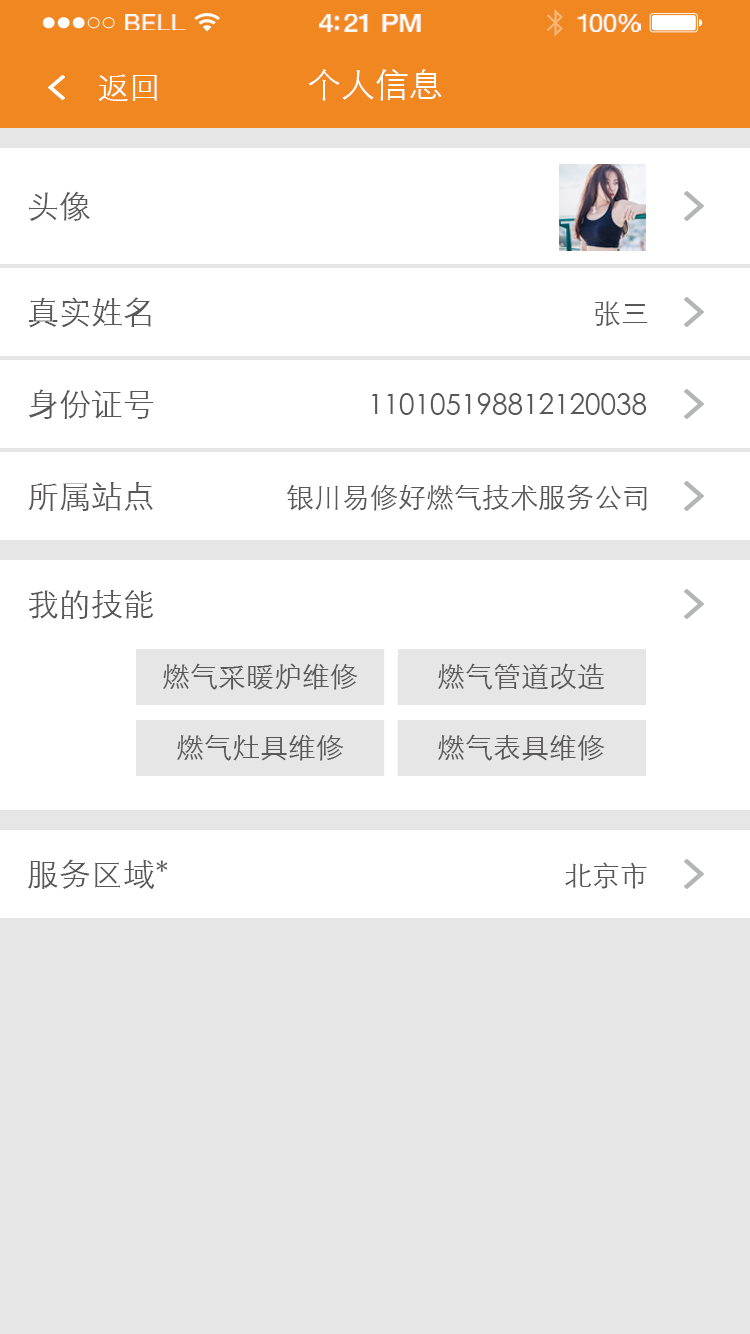
<style>
.page{position:relative;width:750px;height:1334px;background:#ffffff}
.page>*{position:absolute;margin:0}
.t1{font:23.3px "HelveticaNeue";letter-spacing:0.02em;color:#ffffff;scale:1.06 1}
.t2{font:25.3px "HelveticaNeue-Medium";letter-spacing:-0.02em;color:#ffffff;scale:1.06 1}
.t3{font:24.3px "HelveticaNeue";letter-spacing:-0.02em;color:#ffffff;scale:1.06 1}
.t4{font:32px "STXihei";color:#ffffff}
.t5{font:34px "STXihei";color:#ffffff}
.t6{font:32px "STXihei";color:#595757}
.t7{font:28px "STXihei";color:#595757}
</style>
<div class="page">
<p class="t1" style="left:125px;top:14px;width:61px;height:16px">BELL</p>
<p class="t2" style="left:319px;top:14px;width:102px;height:18px">4:21 PM</p>
<p class="t3" style="left:577px;top:14px;width:64px;height:18px">100%</p>
<p class="t4" style="left:98px;top:74px;width:59px;height:27px">返回</p>
<p class="t5" style="left:308px;top:69px;width:134px;height:32px">个人信息</p>
<p class="t6" style="left:29px;top:191px;width:61px;height:30px">头像</p>
<p class="t6" style="left:28px;top:297px;width:123px;height:31px">真实姓名</p>
<p class="t7" style="left:595px;top:301px;width:53px;height:26px">张三</p>
<p class="t6" style="left:28px;top:389px;width:126px;height:30px">身份证号</p>
<p class="t7" style="left:372px;top:393px;width:275px;height:22px">110105198812120038</p>
<p class="t6" style="left:28px;top:482px;width:125px;height:29px">所属站点</p>
<p class="t7" style="left:286px;top:484px;width:361px;height:27px">银川易修好燃气技术服务公司</p>
<p class="t6" style="left:29px;top:589px;width:125px;height:30px">我的技能</p>
<p class="t7" style="left:163px;top:663px;width:195px;height:27px">燃气采暖炉维修</p>
<p class="t7" style="left:438px;top:663px;width:167px;height:27px">燃气管道改造</p>
<p class="t7" style="left:177px;top:734px;width:167px;height:27px">燃气灶具维修</p>
<p class="t7" style="left:438px;top:734px;width:167px;height:27px">燃气表具维修</p>
<p class="t6" style="left:28px;top:859px;width:140px;height:30px">服务区域*</p>
<p class="t7" style="left:565px;top:862px;width:82px;height:27px">北京市</p>
</div>
